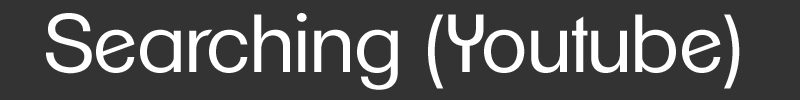
<style>
.page{position:relative;width:800px;height:100px;background:#333333}
.page>*{position:absolute;margin:0}
.t1{font:80px "ClementePDag-Book";color:#ffffff}
</style>
<div class="page">
<p class="t1" style="left:46px;top:13px;width:694px;height:77px">Searching (Youtube)</p>
</div>
